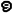
<style>
.page{position:relative;width:13px;height:13px;background:#ffffff}
.page>*{position:absolute;margin:0}
.t1{font:8px "pixelmix";color:#ffffff;scale:1.3 1}
</style>
<div class="page">
<p class="t1" style="left:3px;top:2px;width:7px;height:9px">9</p>
</div>
